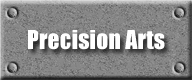
<style>
.page{position:relative;width:192px;height:80px}
.page>*{position:absolute;margin:0}
.t1{font:24px "Impact";color:#ffffff}
</style>
<div class="page">
<p class="t1" style="left:28px;top:30px;width:137px;height:20px">Precision Arts</p>
</div>
